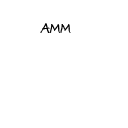
<style>
.page{position:relative;width:128px;height:128px;background:#ffffff}
.page>*{position:absolute;margin:0}
.t1{font:12px "BradleyHandITCTT-Bold";color:#000000;scale:0.75 1}
</style>
<div class="page">
<p class="t1" style="left:40px;top:23px;width:31px;height:10px">AMM</p>
</div>
